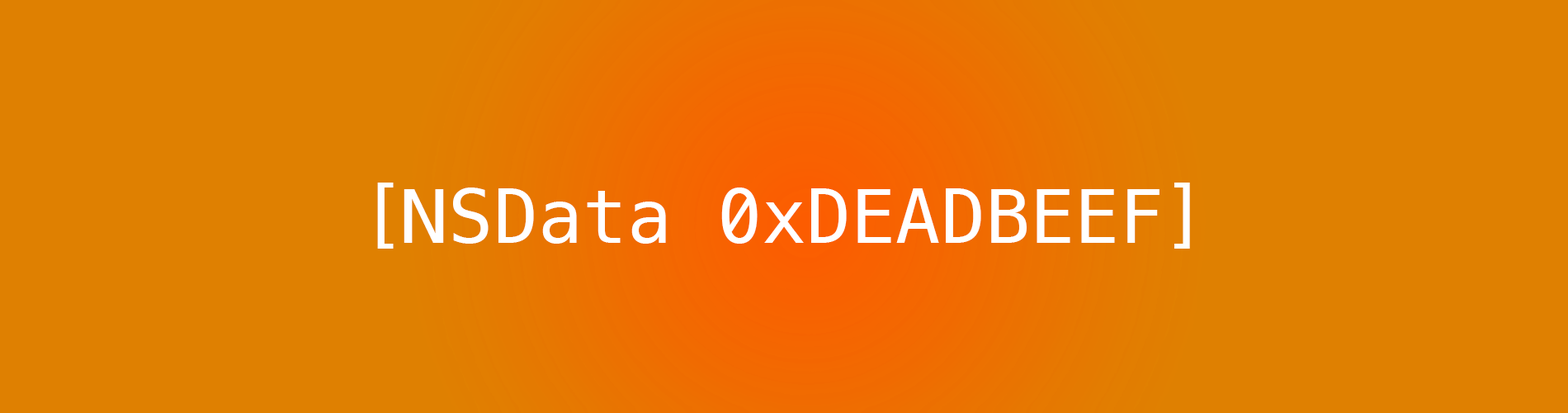
<style>
.page{position:relative;width:1568px;height:413px;background:#df8001}
.page>*{position:absolute;margin:0}
.t1{font:74.3px "Menlo-Regular";color:#ffffff}
</style>
<div class="page">
<p class="t1" style="left:377px;top:182px;width:813px;height:66px">[NSData 0xDEADBEEF]</p>
</div>
